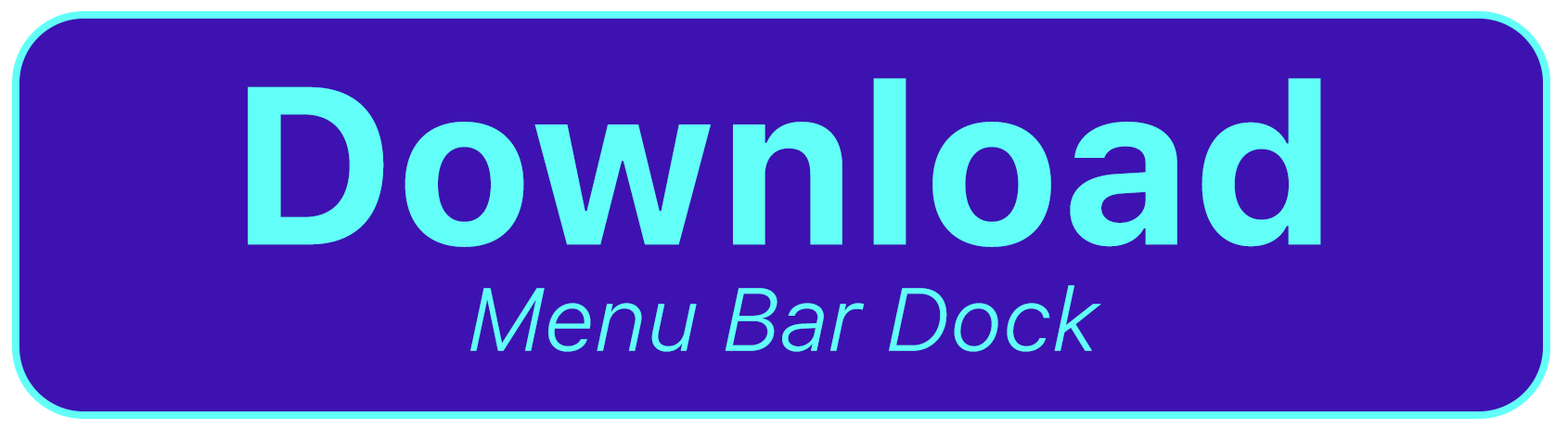
<style>
.page{position:relative;width:1568px;height:430px;background:#3d12b1}
.page>*{position:absolute;margin:0}
.t1{font:88.6px "SFProText-LightItalic";color:#62fff8}
.t2{font:222.7px "SFProText-Bold";color:#62fff8}
</style>
<div class="page">
<p class="t1" style="left:248px;top:78px;width:1073px;height:274px;text-align:center"><span class="t2">Download<br></span>Menu Bar Dock</p>
</div>
